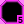
<style>
.page{position:relative;width:24px;height:24px;background:#000000}
.page>*{position:absolute;margin:0}
.t1{font:9px "Montserrat-Bold";color:#000000}
</style>
<div class="page">
<p class="t1" style="left:18px;top:16px;width:5px;height:7px">5</p>
</div>
